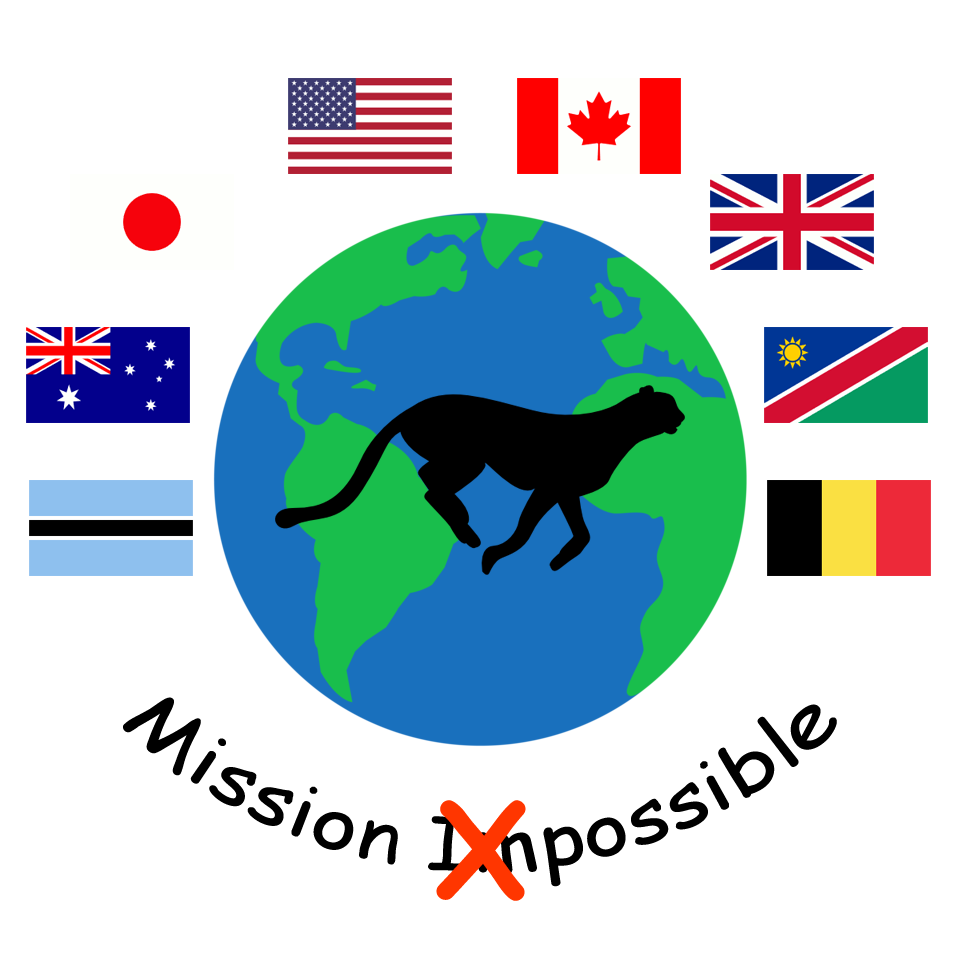
<style>
.page{position:relative;width:960px;height:960px;background:#ffffff}
.page>*{position:absolute;margin:0}
.t1{font:72px "ComicSansMS";color:#000000}
.t2{font:128px "ComicSansMS-Bold";color:#ff3600}
</style>
<div class="page">
<p class="t1" style="left:123px;top:697px;width:714px;height:190px;text-align:center">Mission Impossible</p>
<p class="t2" style="left:436px;top:800px;width:90px;height:101px">X</p>
</div>
